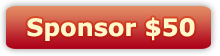
<style>
.page{position:relative;width:220px;height:56px}
.page>*{position:absolute;margin:0}
.t1{font:24px "Verdana-Bold";color:#fef7ca}
</style>
<div class="page">
<p class="t1" style="left:27px;top:17px;width:168px;height:24px">Sponsor $50</p>
</div>
